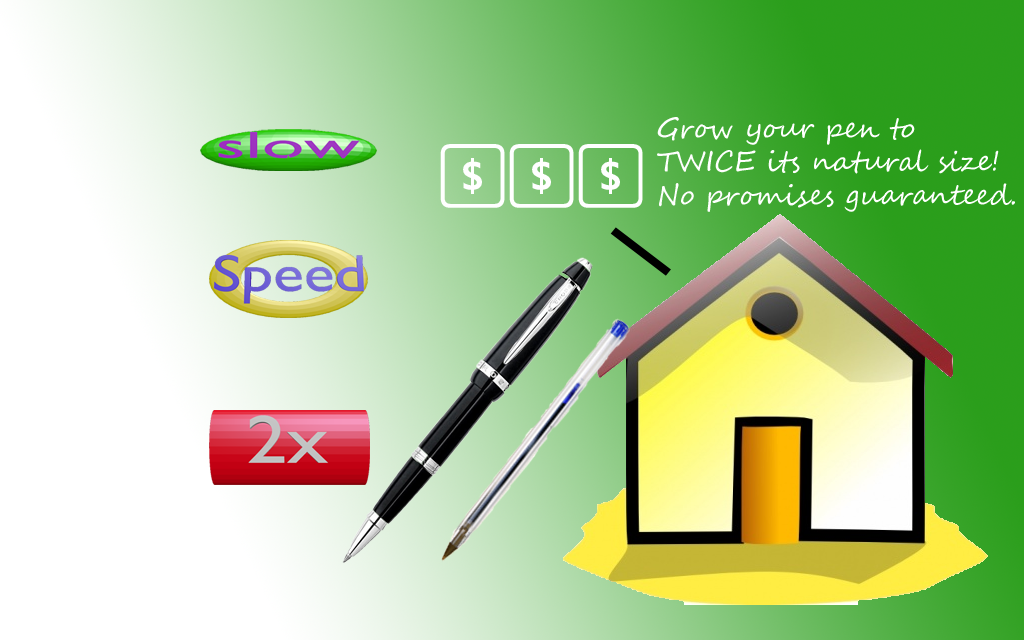
<style>
.page{position:relative;width:1024px;height:640px}
.page>*{position:absolute;margin:0}
.t1{font:28px "SegoeScript";color:#ffffff}
.t2{font:55px "SegoeKeycaps";color:#ffffff}
</style>
<div class="page">
<p class="t1" style="left:657px;top:117px;width:358px;height:95px">Grow your pen to <br>TWICE its natural size!<br>No promises guaranteed.</p>
<p class="t2" style="left:440px;top:144px;width:203px;height:64px">$$$</p>
</div>
